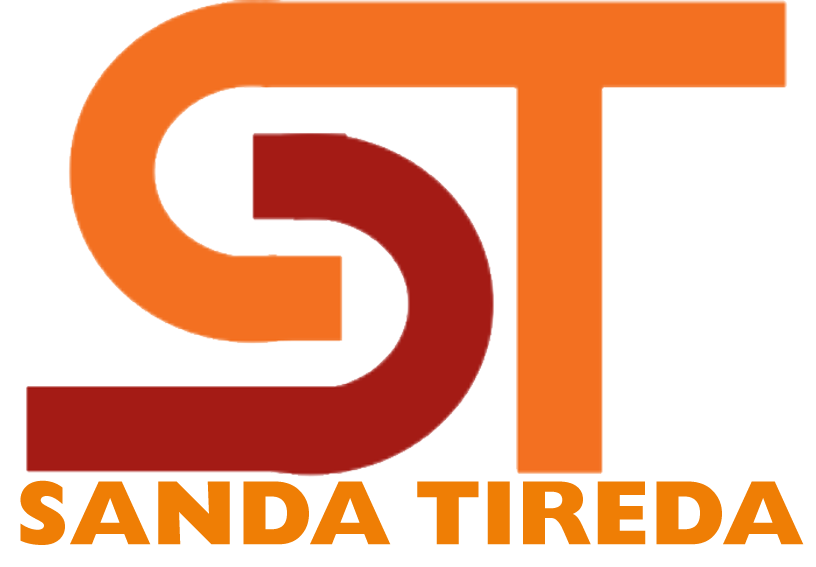
<style>
.page{position:relative;width:816px;height:567px;background:#ffffff}
.page>*{position:absolute;margin:0}
.t1{font:92.1px "GillSansMT-ExtraBold";color:#ef7e05}
</style>
<div class="page">
<p class="t1" style="left:20px;top:480px;width:784px;height:65px">SANDA TIREDA</p>
</div>
